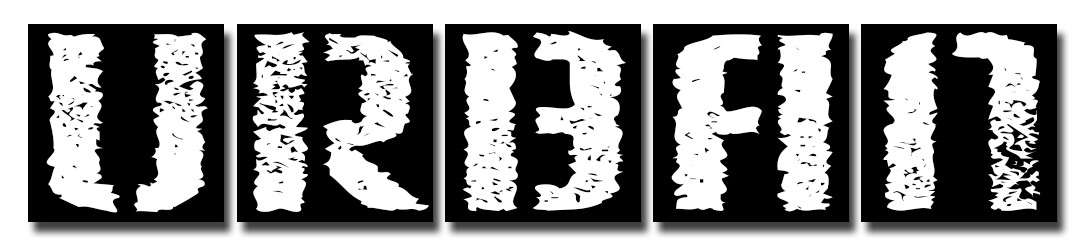
<style>
.page{position:relative;width:1083px;height:246px;background:#ffffff}
.page>*{position:absolute;margin:0}
.t1{font:253px "WeltronUrban";color:#ffffff;scale:1.89 1}
</style>
<div class="page">
<p class="t1" style="left:46px;top:30px;width:995px;height:183px">URBAN</p>
</div>
